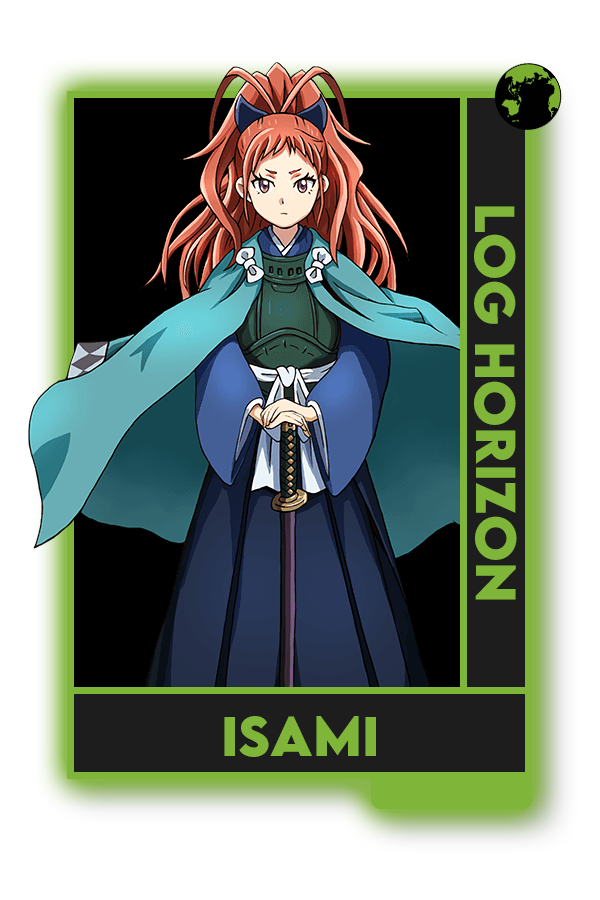
<style>
.page{position:relative;width:600px;height:900px;background:#ffffff}
.page>*{position:absolute;margin:0}
.t1{font:50px "LEMONMILK-Bold";color:#7fad41}
</style>
<div class="page">
<p class="t1" style="left:474px;top:206px;width:43px;height:394px;rotate:90deg">Log Horizon</p>
<p class="t1" style="left:224px;top:716px;width:152px;height:41px">Isami</p>
</div>
